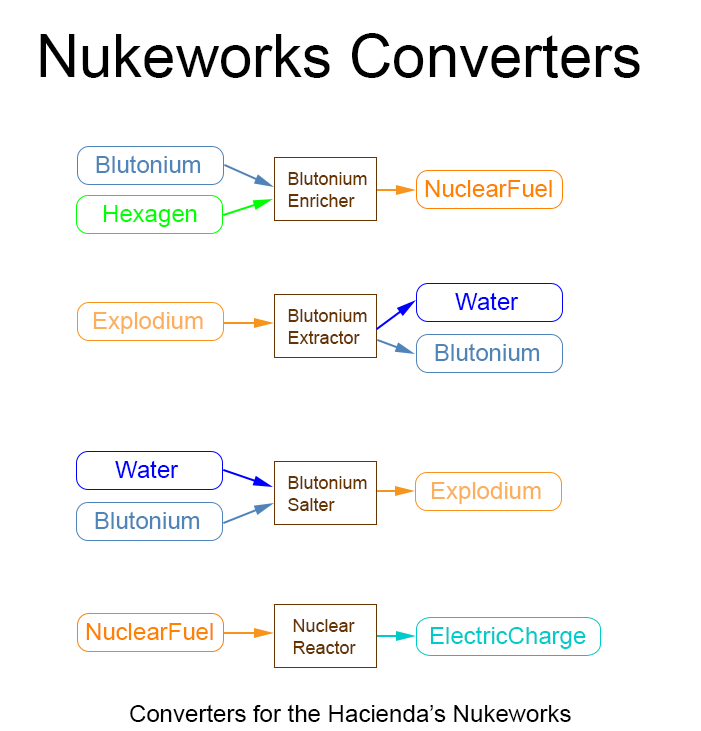
<style>
.page{position:relative;width:701px;height:731px;background:#ffffff}
.page>*{position:absolute;margin:0}
.t1{font:60px "ArialMT";color:#000000}
.t2{font:24px "ArialMT";color:#4f84b9}
.t3{font:18px "ArialMT";color:#663401}
.t4{font:24px "ArialMT";color:#ff8100}
.t5{font:24px "ArialMT";color:#00ff00}
.t6{font:24px "ArialMT";color:#0000ff}
.t7{font:24px "ArialMT";color:#fbaf5d}
.t8{font:24px "ArialMT";color:#00caca}
.t9{font:24px "ArialMT";color:#000000}
</style>
<div class="page">
<p class="t1" style="left:40px;top:33px;width:600px;height:45px">Nukeworks Converters</p>
<p class="t2" style="left:96px;top:155px;width:105px;height:18px">Blutonium</p>
<p class="t3" style="left:288px;top:172px;width:79px;height:35px">Blutonium<br>Enricher</p>
<p class="t4" style="left:425px;top:180px;width:127px;height:17px">NuclearFuel</p>
<p class="t5" style="left:103px;top:205px;width:94px;height:22px">Hexagen</p>
<p class="t6" style="left:455px;top:292px;width:64px;height:18px">Water</p>
<p class="t7" style="left:93px;top:312px;width:110px;height:22px">Explodium</p>
<p class="t3" style="left:288px;top:309px;width:79px;height:35px">Blutonium<br>Extractor</p>
<p class="t2" style="left:435px;top:343px;width:105px;height:18px">Blutonium</p>
<p class="t6" style="left:115px;top:460px;width:64px;height:18px">Water</p>
<p class="t3" style="left:288px;top:476px;width:79px;height:35px">Blutonium<br>Salter</p>
<p class="t7" style="left:431px;top:482px;width:110px;height:22px">Explodium</p>
<p class="t2" style="left:95px;top:511px;width:105px;height:18px">Blutonium</p>
<p class="t4" style="left:86px;top:623px;width:127px;height:17px">NuclearFuel</p>
<p class="t3" style="left:293px;top:619px;width:63px;height:35px">Nuclear<br>Reactor</p>
<p class="t8" style="left:430px;top:626px;width:156px;height:23px">ElectricCharge</p>
<p class="t9" style="left:130px;top:704px;width:441px;height:18px">Converters for the Hacienda’s Nukeworks</p>
</div>
